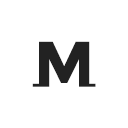
<style>
.page{position:relative;width:128px;height:128px;background:#ffffff}
.page>*{position:absolute;margin:0}
.t1{font:64px "MontserratSubrayada-Bold";color:#222222}
</style>
<div class="page">
<p class="t1" style="left:32px;top:41px;width:64px;height:46px">M</p>
</div>
